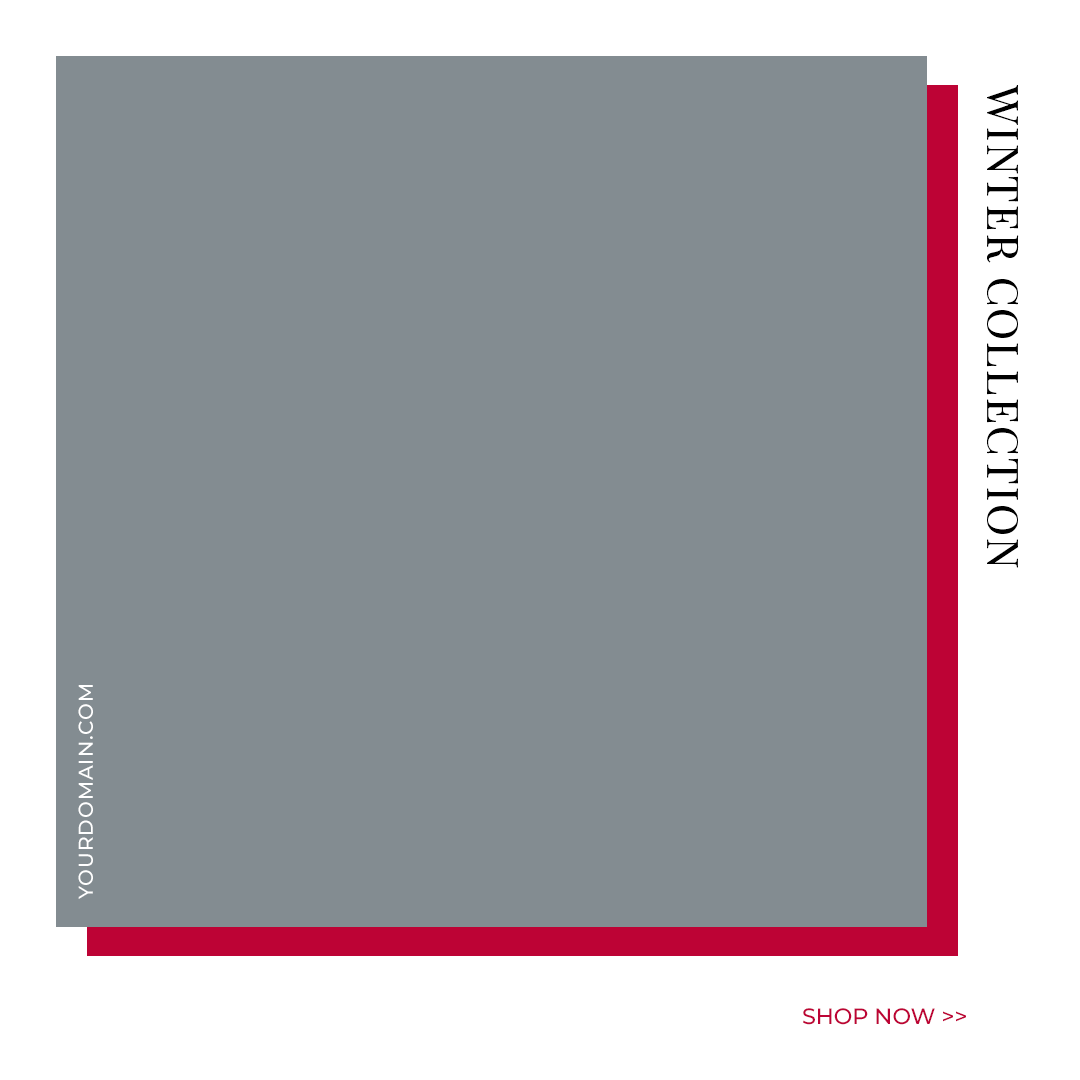
<style>
.page{position:relative;width:1080px;height:1080px;background:#838c91}
.page>*{position:absolute;margin:0}
.t1{font:43.3px "PlayfairDisplay-Regular";letter-spacing:0.05em;color:#000000;text-transform:uppercase}
.t2{font:20px "Montserrat-Medium";letter-spacing:0.05em;color:#ffffff;text-transform:uppercase}
.t3{font:22.2px "Montserrat-Medium";color:#bd0335;text-transform:uppercase}
</style>
<div class="page">
<p class="t1" style="left:987px;top:85px;width:32px;height:483px;rotate:90deg">Winter Collection</p>
<p class="t2" style="left:78px;top:685px;width:15px;height:214px;rotate:-90deg">Yourdomain.com</p>
<p class="t3" style="left:803px;top:1008px;width:163px;height:17px">Shop Now &gt;&gt;</p>
</div>
